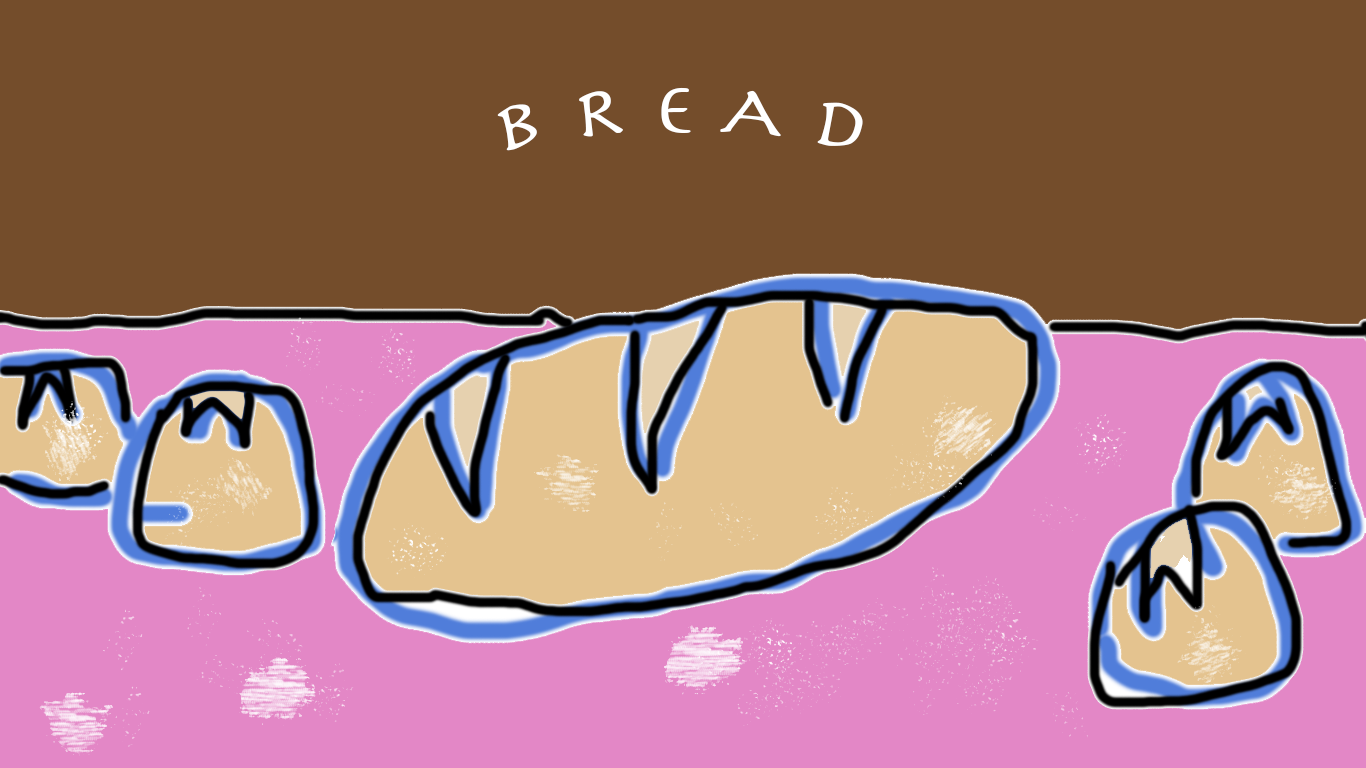
<style>
.page{position:relative;width:1366px;height:768px;background:#744d2b}
.page>*{position:absolute;margin:0}
.t1{font:72px "Herculanum";color:#ffffff}
</style>
<div class="page">
<p class="t1" style="left:497px;top:87px;width:366px;height:64px">B R E A D</p>
</div>
